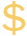
<style>
.page{position:relative;width:27px;height:36px;background:#ffffff}
.page>*{position:absolute;margin:0}
.t1{font:42px "FranklinGothic-Book";color:#f7cc65;scale:1.17 1}
</style>
<div class="page">
<p class="t1" style="left:2px;top:1px;width:24px;height:34px">$</p>
</div>
